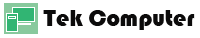
<style>
.page{position:relative;width:200px;height:38px;background:#ffffff}
.page>*{position:absolute;margin:0}
.t1{font:24px "Bauhaus93";color:#0c0b0b}
</style>
<div class="page">
<p class="t1" style="left:43px;top:10px;width:152px;height:20px">Tek Computer</p>
</div>
